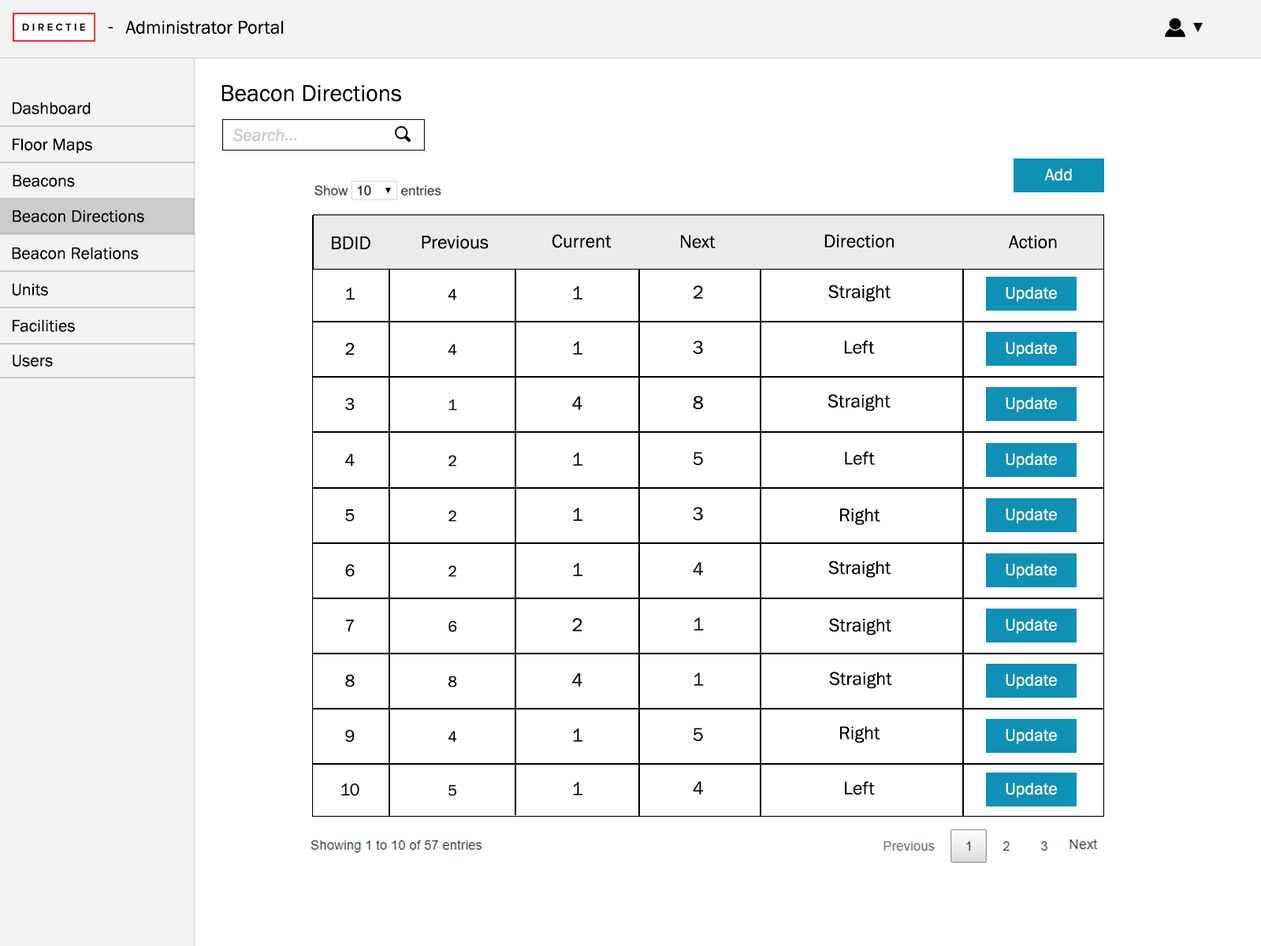
<style>
.page{position:relative;width:1261px;height:946px;background:#ffffff}
.page>*{position:absolute;margin:0}
.t1{font:18.9px "FranklinGothic-Book";color:#000000}
.t2{font:23.6px "FranklinGothic-Book";color:#000000}
.t3{font:17.3px "FranklinGothic-Book";color:#000000}
.t4{font:17.3px "FranklinGothic-Book";color:#ffffff}
.t5{font:15.8px "FranklinGothic-Book";color:#000000}
</style>
<div class="page">
<p class="t1" style="left:108px;top:27px;width:5px;height:1px">-</p>
<p class="t1" style="left:125px;top:20px;width:159px;height:14px">Administrator Portal</p>
<p class="t2" style="left:221px;top:85px;width:180px;height:17px">Beacon Directions</p>
<p class="t3" style="left:13px;top:102px;width:78px;height:12px">Dashboard</p>
<p class="t3" style="left:13px;top:138px;width:79px;height:16px">Floor Maps</p>
<p class="t4" style="left:1044px;top:169px;width:28px;height:11px">Add</p>
<p class="t3" style="left:13px;top:174px;width:62px;height:13px">Beacons</p>
<p class="t3" style="left:13px;top:210px;width:131px;height:12px">Beacon Directions</p>
<p class="t1" style="left:332px;top:236px;width:38px;height:14px">BDID</p>
<p class="t1" style="left:422px;top:236px;width:67px;height:13px">Previous</p>
<p class="t1" style="left:552px;top:234px;width:60px;height:14px">Current</p>
<p class="t1" style="left:681px;top:235px;width:35px;height:13px">Next</p>
<p class="t1" style="left:824px;top:234px;width:70px;height:14px">Direction</p>
<p class="t1" style="left:1008px;top:235px;width:49px;height:14px">Action</p>
<p class="t3" style="left:12px;top:247px;width:127px;height:12px">Beacon Relations</p>
<p class="t3" style="left:13px;top:283px;width:35px;height:13px">Units</p>
<p class="t3" style="left:346px;top:287px;width:9px;height:12px">1</p>
<p class="t5" style="left:448px;top:288px;width:9px;height:12px">4</p>
<p class="t1" style="left:573px;top:286px;width:9px;height:13px">1</p>
<p class="t1" style="left:694px;top:285px;width:9px;height:14px">2</p>
<p class="t1" style="left:828px;top:284px;width:63px;height:18px">Straight</p>
<p class="t4" style="left:1006px;top:287px;width:51px;height:15px">Update</p>
<p class="t3" style="left:13px;top:319px;width:62px;height:13px">Facilities</p>
<p class="t1" style="left:573px;top:341px;width:9px;height:14px">1</p>
<p class="t1" style="left:693px;top:340px;width:10px;height:14px">3</p>
<p class="t1" style="left:844px;top:340px;width:31px;height:14px">Left</p>
<p class="t3" style="left:13px;top:354px;width:40px;height:12px">Users</p>
<p class="t3" style="left:345px;top:342px;width:10px;height:13px">2</p>
<p class="t5" style="left:448px;top:344px;width:9px;height:11px">4</p>
<p class="t4" style="left:1006px;top:342px;width:51px;height:15px">Update</p>
<p class="t3" style="left:345px;top:397px;width:10px;height:14px">3</p>
<p class="t5" style="left:449px;top:399px;width:8px;height:12px">1</p>
<p class="t1" style="left:572px;top:396px;width:10px;height:14px">4</p>
<p class="t1" style="left:693px;top:396px;width:10px;height:13px">8</p>
<p class="t1" style="left:827px;top:394px;width:64px;height:17px">Straight</p>
<p class="t4" style="left:1006px;top:397px;width:51px;height:15px">Update</p>
<p class="t3" style="left:345px;top:453px;width:10px;height:13px">4</p>
<p class="t5" style="left:448px;top:455px;width:8px;height:12px">2</p>
<p class="t1" style="left:573px;top:452px;width:9px;height:14px">1</p>
<p class="t1" style="left:693px;top:452px;width:10px;height:13px">5</p>
<p class="t1" style="left:845px;top:451px;width:30px;height:14px">Left</p>
<p class="t4" style="left:1006px;top:453px;width:51px;height:15px">Update</p>
<p class="t3" style="left:345px;top:509px;width:10px;height:13px">5</p>
<p class="t5" style="left:448px;top:510px;width:8px;height:12px">2</p>
<p class="t1" style="left:573px;top:508px;width:9px;height:13px">1</p>
<p class="t1" style="left:693px;top:507px;width:10px;height:13px">3</p>
<p class="t1" style="left:840px;top:508px;width:40px;height:17px">Right</p>
<p class="t4" style="left:1006px;top:508px;width:51px;height:15px">Update</p>
<p class="t3" style="left:345px;top:563px;width:10px;height:14px">6</p>
<p class="t5" style="left:448px;top:565px;width:8px;height:12px">2</p>
<p class="t1" style="left:573px;top:563px;width:9px;height:13px">1</p>
<p class="t1" style="left:693px;top:562px;width:10px;height:13px">4</p>
<p class="t1" style="left:828px;top:560px;width:63px;height:18px">Straight</p>
<p class="t4" style="left:1006px;top:563px;width:51px;height:15px">Update</p>
<p class="t1" style="left:572px;top:618px;width:10px;height:13px">2</p>
<p class="t1" style="left:694px;top:617px;width:10px;height:13px">1</p>
<p class="t1" style="left:829px;top:618px;width:62px;height:17px">Straight</p>
<p class="t3" style="left:346px;top:619px;width:8px;height:12px">7</p>
<p class="t5" style="left:448px;top:620px;width:9px;height:12px">6</p>
<p class="t4" style="left:1006px;top:619px;width:51px;height:15px">Update</p>
<p class="t3" style="left:345px;top:674px;width:10px;height:13px">8</p>
<p class="t5" style="left:448px;top:675px;width:9px;height:12px">8</p>
<p class="t1" style="left:572px;top:673px;width:10px;height:13px">4</p>
<p class="t1" style="left:694px;top:672px;width:10px;height:14px">1</p>
<p class="t1" style="left:829px;top:671px;width:63px;height:18px">Straight</p>
<p class="t4" style="left:1006px;top:674px;width:51px;height:15px">Update</p>
<p class="t1" style="left:840px;top:726px;width:40px;height:17px">Right</p>
<p class="t3" style="left:345px;top:729px;width:10px;height:13px">9</p>
<p class="t5" style="left:448px;top:731px;width:9px;height:11px">4</p>
<p class="t1" style="left:573px;top:728px;width:9px;height:14px">1</p>
<p class="t1" style="left:693px;top:727px;width:10px;height:14px">5</p>
<p class="t4" style="left:1006px;top:729px;width:51px;height:15px">Update</p>
<p class="t3" style="left:341px;top:783px;width:18px;height:13px">10</p>
<p class="t5" style="left:448px;top:784px;width:8px;height:12px">5</p>
<p class="t1" style="left:573px;top:782px;width:9px;height:13px">1</p>
<p class="t1" style="left:693px;top:781px;width:10px;height:13px">4</p>
<p class="t1" style="left:845px;top:781px;width:30px;height:14px">Left</p>
<p class="t4" style="left:1006px;top:783px;width:51px;height:15px">Update</p>
</div>
